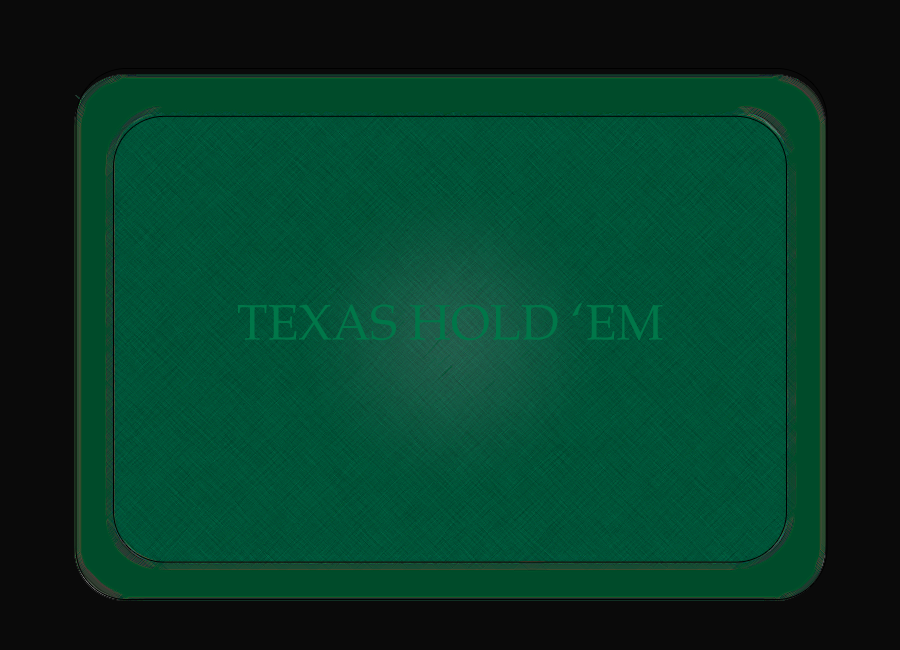
<style>
.page{position:relative;width:900px;height:650px;background:#0a0a0a}
.page>*{position:absolute;margin:0}
.t1{font:50px "BookAntiqua";color:#007749}
</style>
<div class="page">
<p class="t1" style="left:237px;top:303px;width:426px;height:38px">TEXAS HOLD ‘EM</p>
</div>
